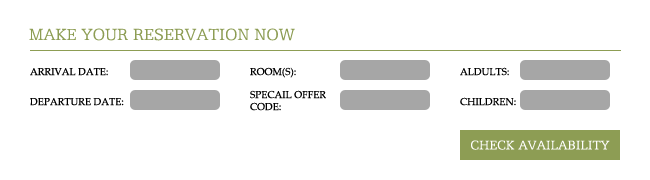
<style>
.page{position:relative;width:650px;height:180px;background:#ffffff}
.page>*{position:absolute;margin:0}
.t1{font:18px "UVNAiCapNhe";color:#8d9d54}
.t2{font:10px "PalatinoLinotype-Roman";color:#000000}
.t3{font:10px "PalatinoLinotype-Roman";color:#010101}
.t4{font:14px "UVNAiCapNhe";color:#ffffff}
</style>
<div class="page">
<p class="t1" style="left:29px;top:28px;width:266px;height:13px">MAKE YOUR RESERVATION NOW</p>
<p class="t2" style="left:30px;top:68px;width:78px;height:8px">ARRIVAL DATE:</p>
<p class="t2" style="left:250px;top:67px;width:46px;height:11px">ROOM(S):</p>
<p class="t3" style="left:460px;top:67px;width:49px;height:9px">ALDULTS:</p>
<p class="t2" style="left:30px;top:98px;width:94px;height:8px">DEPARTURE DATE:</p>
<p class="t2" style="left:250px;top:90px;width:76px;height:21px">SPECAIL OFFER <br>CODE:</p>
<p class="t2" style="left:460px;top:97px;width:56px;height:9px">CHILDREN:</p>
<p class="t4" style="left:471px;top:140px;width:139px;height:10px">CHECK AVAILABILITY</p>
</div>
